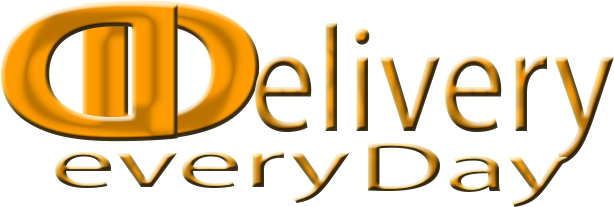
<style>
.page{position:relative;width:614px;height:207px;background:#ffffff}
.page>*{position:absolute;margin:0}
.t1{font:203px "MyriadPro-Bold";font-weight:bold;scale:1.46 1}
.t2{font:152.2px "MyriadPro-Regular";scale:0.86 1}
.t3{font:70.7px "MyriadPro-Regular";scale:1.85 1}
</style>
<div class="page">
<p class="t1" style="left:0px;top:1px;width:178px;height:141px;rotate:180deg">D</p>
<p class="t1" style="left:82px;top:0px;width:178px;height:141px">D</p>
<p class="t2" style="left:255px;top:23px;width:359px;height:142px">elivery</p>
<p class="t3" style="left:368px;top:143px;width:200px;height:64px">Day</p>
<p class="t3" style="left:55px;top:151px;width:295px;height:52px">every</p>
</div>
